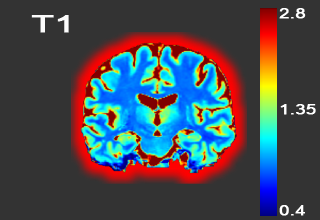
<style>
.page{position:relative;width:320px;height:220px;background:#333333}
.page>*{position:absolute;margin:0}
.t1{font:24.2px "ArialNarrow";letter-spacing:0.002em;color:#ffffff;font-weight:bold;scale:1.8 1}
.t2{font:12.1px "ArialNarrow";letter-spacing:0.002em;color:#ffffff;font-weight:bold;scale:1.8 1}
</style>
<div class="page">
<p class="t1" style="left:31px;top:15px;width:38px;height:18px">T1</p>
<p class="t2" style="left:279px;top:8px;width:27px;height:11px">2.8</p>
<p class="t2" style="left:280px;top:104px;width:36px;height:11px">1.35</p>
<p class="t2" style="left:279px;top:205px;width:26px;height:11px">0.4</p>
</div>
